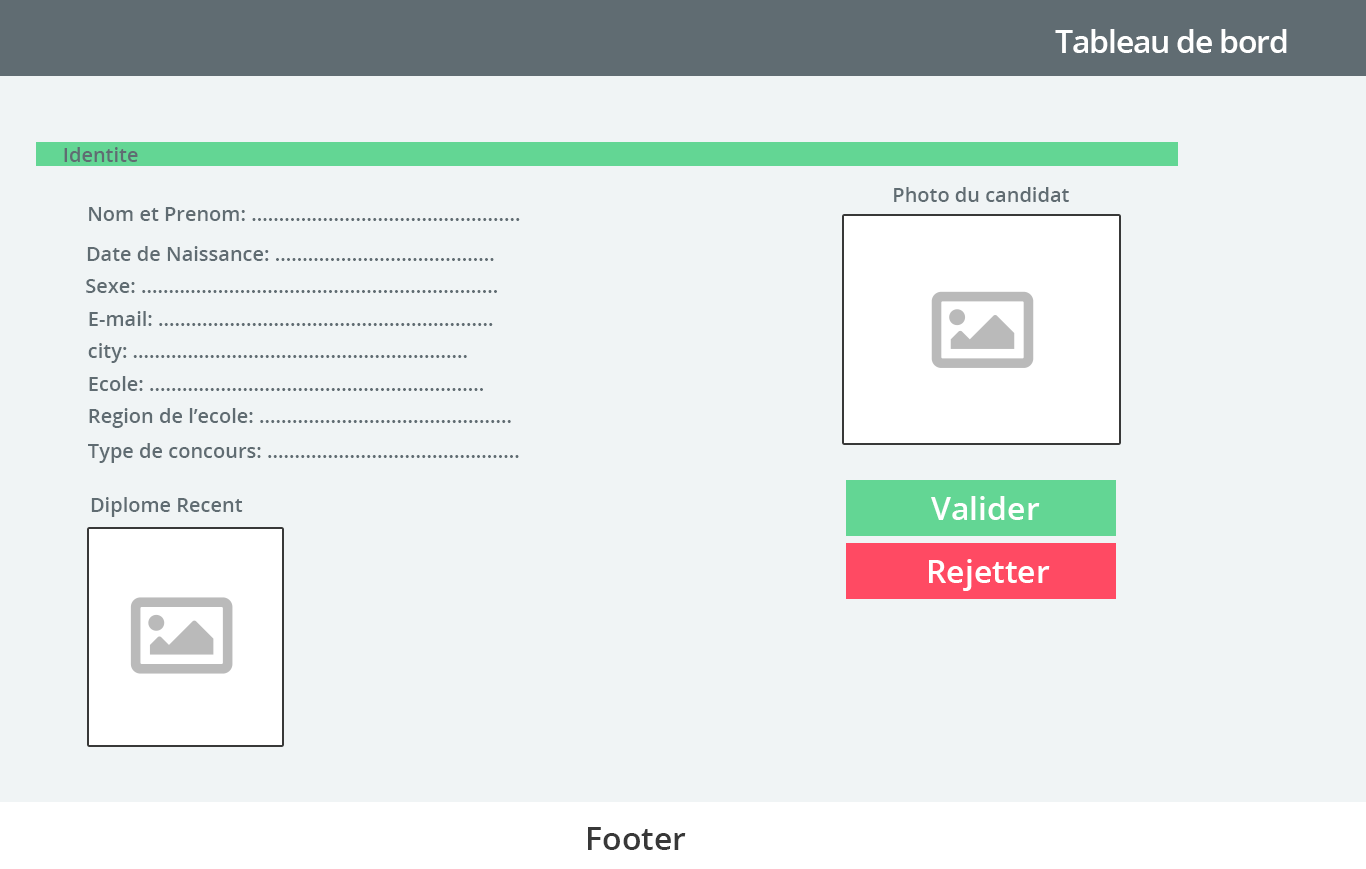
<style>
.page{position:relative;width:1366px;height:869px;background:#f0f4f5}
.page>*{position:absolute;margin:0}
.t1{font:32px "OpenSans-Semibold";letter-spacing:-0.04em;color:#ffffff}
.t2{font:20px "OpenSans-Semibold";color:#606c72}
.t3{font:32px "OpenSans-Semibold";color:#ffffff}
.t4{font:32px "OpenSans-Semibold";color:#383838}
</style>
<div class="page">
<p class="t1" style="left:1055px;top:29px;width:232px;height:24px">Tableau de bord</p>
<p class="t2" style="left:64px;top:147px;width:74px;height:15px">Identite</p>
<p class="t2" style="left:894px;top:187px;width:175px;height:15px">Photo du candidat</p>
<p class="t2" style="left:89px;top:207px;width:431px;height:14px">Nom et Prenom: .................................................</p>
<p class="t2" style="left:87px;top:246px;width:407px;height:15px">Date de Naissance: ........................................</p>
<p class="t2" style="left:86px;top:279px;width:411px;height:14px">Sexe: .................................................................</p>
<p class="t2" style="left:89px;top:311px;width:404px;height:15px">E-mail: .............................................................</p>
<p class="t2" style="left:88px;top:343px;width:379px;height:20px">city: .............................................................</p>
<p class="t2" style="left:89px;top:376px;width:394px;height:15px">Ecole: .............................................................</p>
<p class="t2" style="left:89px;top:408px;width:422px;height:20px">Region de l’ecole: ..............................................</p>
<p class="t2" style="left:88px;top:443px;width:431px;height:20px">Type de concours: ..............................................</p>
<p class="t2" style="left:91px;top:497px;width:152px;height:20px">Diplome Recent</p>
<p class="t3" style="left:931px;top:496px;width:109px;height:24px">Valider</p>
<p class="t3" style="left:929px;top:559px;width:121px;height:32px">Rejetter</p>
<p class="t4" style="left:588px;top:827px;width:98px;height:23px">Footer</p>
</div>
